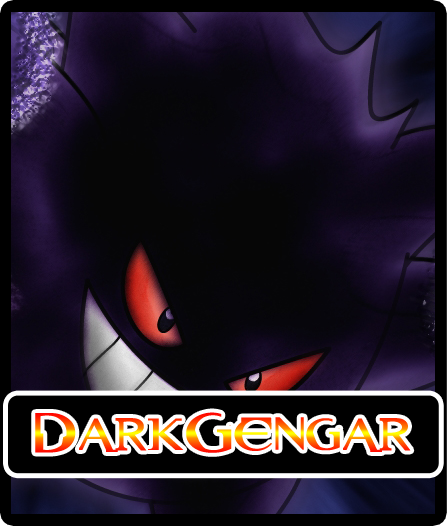
<style>
.page{position:relative;width:447px;height:526px}
.page>*{position:absolute;margin:0}
.t1{font:90px "ResidentEvil-Regular";letter-spacing:0.01em}
</style>
<div class="page">
<p class="t1" style="left:35px;top:412px;width:376px;height:41px">DarkGengar</p>
</div>
